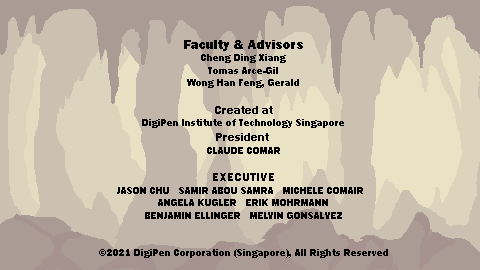
<style>
.page{position:relative;width:480px;height:270px;background:#ccc1b0}
.page>*{position:absolute;margin:0}
.t1{font:10.4px "FranklinGothic-Heavy";color:#000000}
.t2{font:13.5px "FranklinGothic-Heavy";color:#000000}
.t3{font:12.5px "FranklinGothic-Heavy";color:#000000}
</style>
<div class="page">
<p class="t1" style="left:117px;top:40px;width:246px;height:179px;text-align:center"><span class="t2">Faculty &amp; Advisors<br></span>Cheng Ding Xiang<br>Tomas Arce-Gil<br>Wong Han Feng, Gerald<br><br><span class="t3">Created at<br></span>DigiPen Institute of Technology Singapore<br><span class="t3">President <br></span>CLAUDE COMAR<br><br><span class="t3">EXECUTIVE<br></span>JASON CHU   SAMIR ABOU SAMRA   MICHELE COMAIR  <br>ANGELA KUGLER   ERIK MOHRMANN<br>BENJAMIN ELLINGER   MELVIN GONSALVEZ</p>
</div>
